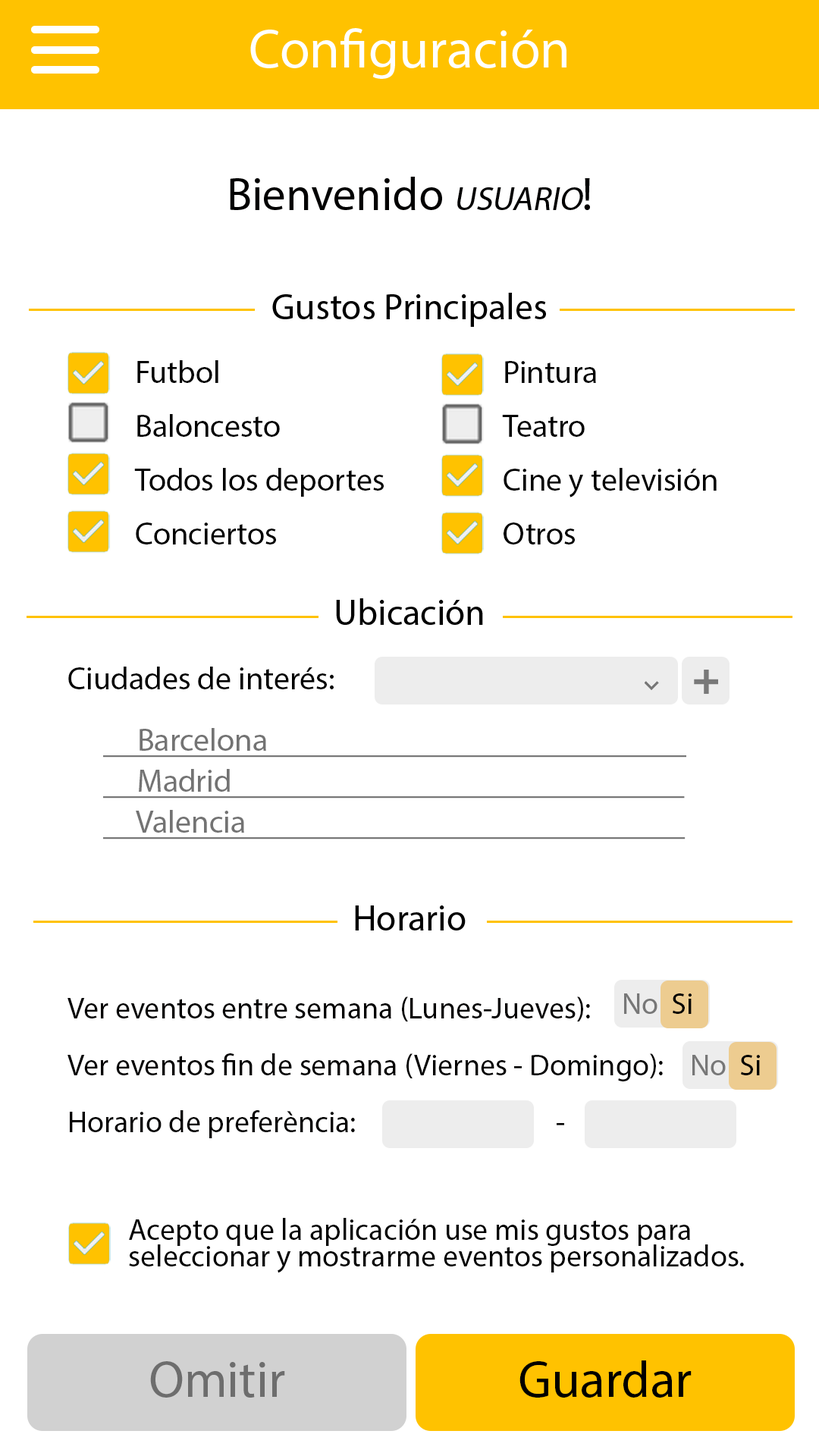
<style>
.page{position:relative;width:819px;height:1456px;background:#ffffff}
.page>*{position:absolute;margin:0}
.t1{font:31.8px/53.8px "MyriadPro-Regular";color:#000000}
.t2{font:31.8px "MyriadPro-Regular";color:#000000}
.t3{font:31.8px/40.9px "MyriadPro-Regular";color:#737373;text-decoration:underline}
.t4{font:30.3px/56.9px "MyriadPro-Regular";color:#010000}
.t5{font:30.3px "MyriadPro-Regular";color:#777777}
.t6{font:30.3px "MyriadPro-Regular";color:#000000}
.t7{font:30.3px/26.5px "MyriadPro-Regular";color:#000000}
.t8{font:51.6px "MyriadPro-Regular";color:#6d6d6d}
.t9{font:51.6px "MyriadPro-Regular";color:#000000}
</style>
<div class="page">
<p class="t1" style="left:134px;top:360px;width:250px;height:184px">Futbol<br>Baloncesto<br>Todos los deportes<br>Conciertos</p>
<p class="t1" style="left:502px;top:361px;width:215px;height:183px">Pintura<br>Teatro<br>Cine y televisión<br>Otros</p>
<p class="t2" style="left:68px;top:667px;width:266px;height:22px">Ciudades de interés:</p>
<p class="t3" style="left:103px;top:728px;width:583px;height:111px">Barcelona                                                              <br>     Madrid                                                                   <br>     Valencia</p>
<p class="t4" style="left:67px;top:996px;width:596px;height:142px">Ver eventos entre semana (Lunes-Jueves):<br>Ver eventos fin de semana (Viernes - Domingo):<br>Horario de preferència:                               -</p>
<p class="t5" style="left:624px;top:993px;width:68px;height:21px">No  <span class="t6">Si</span></p>
<p class="t5" style="left:692px;top:1055px;width:68px;height:20px">No  <span class="t6">Si</span></p>
<p class="t7" style="left:129px;top:1218px;width:615px;height:55px">Acepto que la aplicación use mis gustos para<br>seleccionar y mostrarme eventos personalizados.</p>
<p class="t8" style="left:150px;top:1361px;width:135px;height:37px">Omitir</p>
<p class="t9" style="left:519px;top:1360px;width:173px;height:38px">Guardar</p>
</div>
